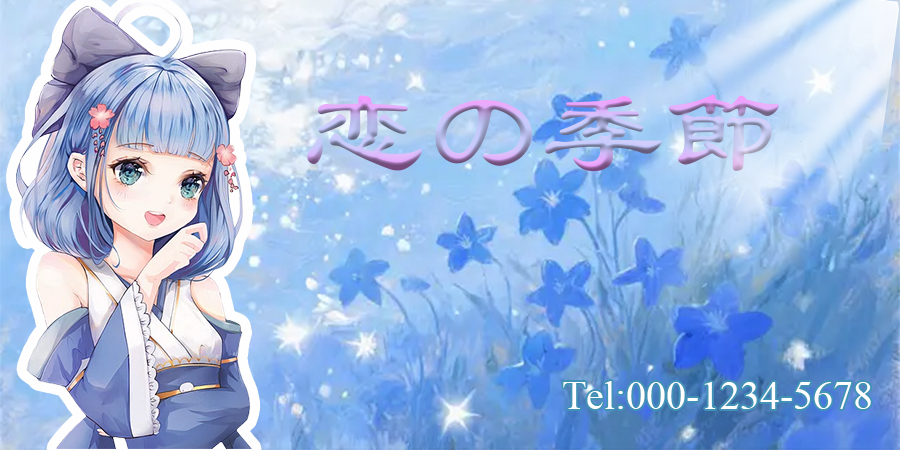
<style>
.page{position:relative;width:900px;height:450px}
.page>*{position:absolute;margin:0}
.t1{font:120px "STBaoliSC-Regular"}
.t2{font:40px "TimesNewRomanPSMT";color:#ffffff}
</style>
<div class="page">
<p class="t1" style="left:307px;top:94px;width:472px;height:78px">恋の季節</p>
<p class="t2" style="left:563px;top:381px;width:308px;height:28px">Tel:000-1234-5678</p>
</div>
